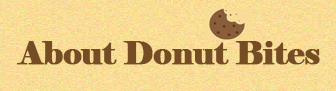
<style>
.page{position:relative;width:336px;height:91px}
.page>*{position:absolute;margin:0}
.t1{font:32px "Elephant-Regular";letter-spacing:-0.025em;color:#754c24;font-weight:bold}
</style>
<div class="page">
<p class="t1" style="left:17px;top:41px;width:303px;height:24px">About Donut Bites</p>
</div>
